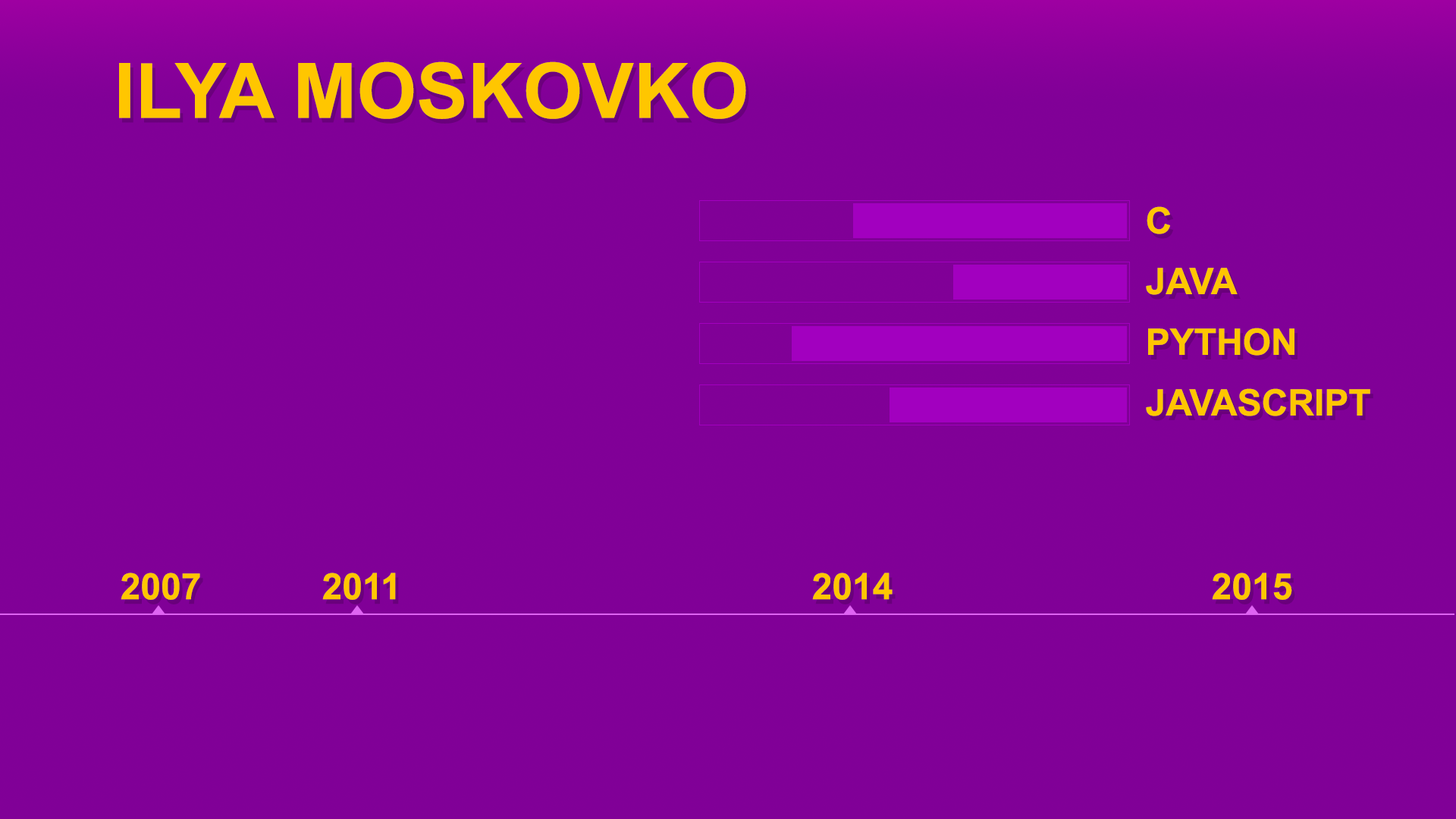
<style>
.page{position:relative;width:1456px;height:819px;background:#800097}
.page>*{position:absolute;margin:0}
.t1{font:76.7px "Arial-BoldMT";color:#ffc600}
.t2{font:36.4px/60.7px "Arial-BoldMT";color:#ffc600}
.t3{font:36.4px "Arial-BoldMT";color:#ffc600}
</style>
<div class="page">
<p class="t1" style="left:119px;top:61px;width:627px;height:58px">ILYA MOSKOVKO</p>
<p class="t2" style="left:1146px;top:206px;width:224px;height:210px">C<br>JAVA<br>PYTHON<br>JAVASCRIPT</p>
<p class="t3" style="left:121px;top:573px;width:79px;height:27px">2007</p>
<p class="t3" style="left:322px;top:573px;width:74px;height:27px">2011</p>
<p class="t3" style="left:812px;top:573px;width:81px;height:27px">2014</p>
<p class="t3" style="left:1212px;top:573px;width:80px;height:27px">2015</p>
</div>
